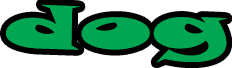
<style>
.page{position:relative;width:232px;height:68px;background:#00a651}
.page>*{position:absolute;margin:0}
.t1{font:60px "SnapITC-Regular";color:#00a651;scale:2 1}
</style>
<div class="page">
<p class="t1" style="left:6px;top:4px;width:221px;height:59px">dog</p>
</div>
